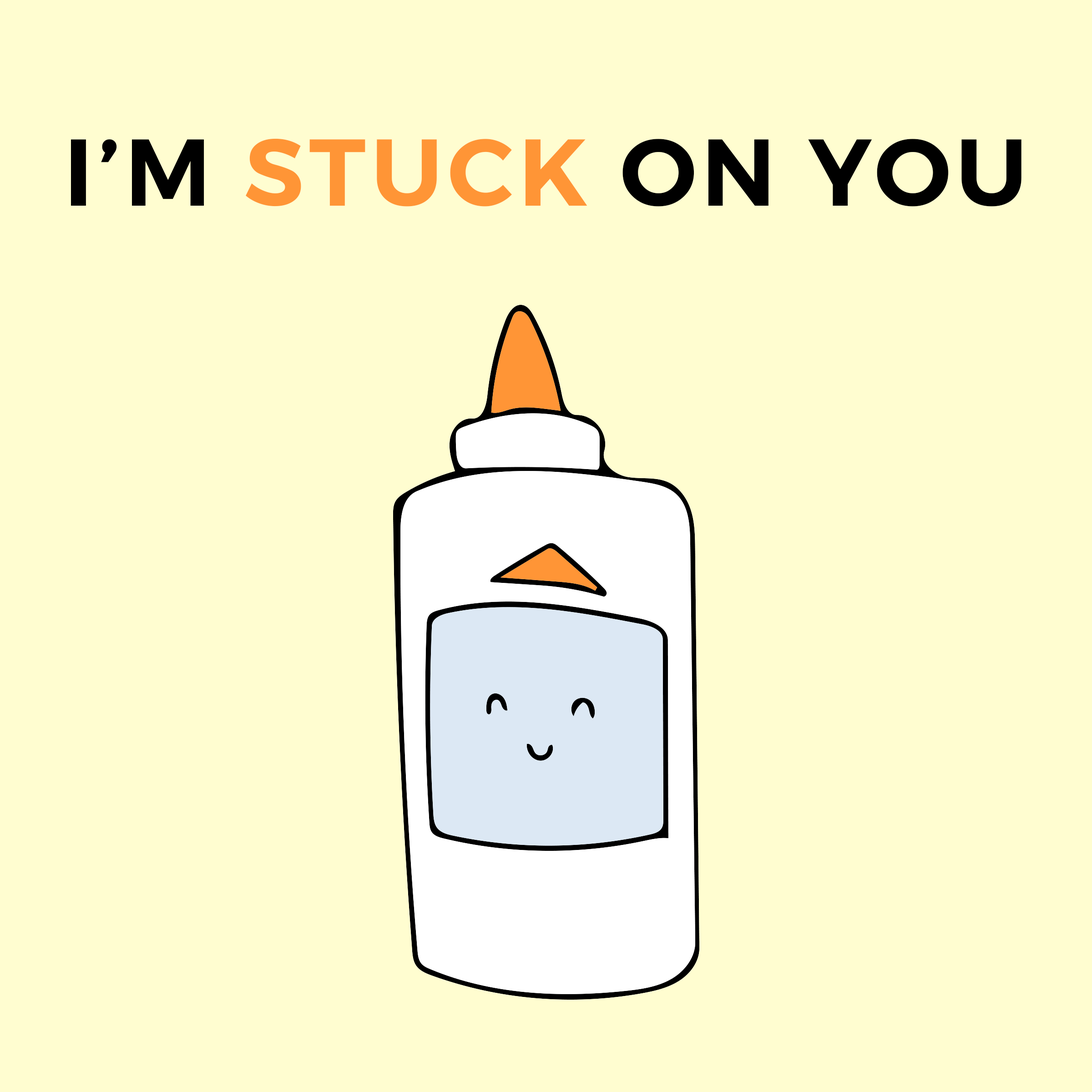
<style>
.page{position:relative;width:1092px;height:1092px;background:#fffdd0}
.page>*{position:absolute;margin:0}
.t1{font:94.8px "Montserrat-SemiBold";letter-spacing:0.05em;color:#000000}
.t2{font:94.8px "Montserrat-SemiBold";letter-spacing:0.05em;color:#ff9536}
</style>
<div class="page">
<p class="t1" style="left:71px;top:138px;width:950px;height:69px">I’M <span class="t2">STUCK </span>ON YOU</p>
</div>
